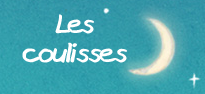
<style>
.page{position:relative;width:205px;height:94px}
.page>*{position:absolute;margin:0}
.t1{font:33.3px/29.2px "LoupoTest01Font";letter-spacing:-0.05em;color:#ffffff;scale:1.2 1}
.t2{font:33.3px/29.2px "LoupoTest01Font";letter-spacing:-0.075em;color:#ffffff;scale:1.2 1}
</style>
<div class="page">
<p class="t1" style="left:22px;top:14px;width:105px;height:49px;text-align:center"><span class="t2">Les <br></span>coulisses</p>
</div>
